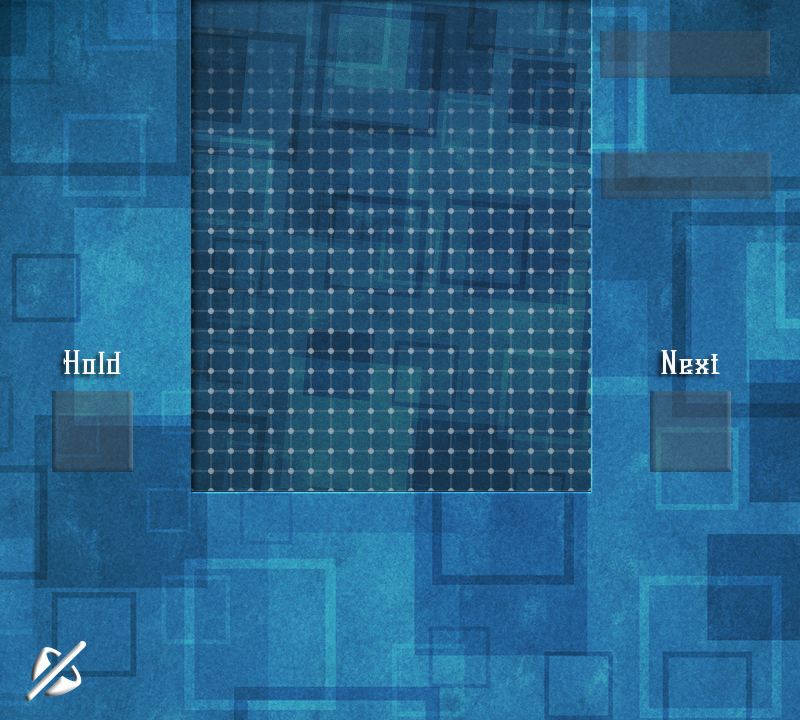
<style>
.page{position:relative;width:800px;height:720px}
.page>*{position:absolute;margin:0}
.t1{font:30px "Springmarch-Roman";color:#f9f6f6}
</style>
<div class="page">
<p class="t1" style="left:63px;top:350px;width:58px;height:24px">Hold</p>
<p class="t1" style="left:661px;top:350px;width:59px;height:24px">Next</p>
</div>
